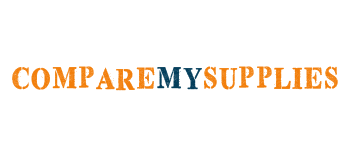
<style>
.page{position:relative;width:350px;height:150px;background:#ffffff}
.page>*{position:absolute;margin:0}
.t1{font:30px "TopSecretStamp";color:#f27f0c}
.t2{font:30px "TopSecretStamp";color:#053f5c}
</style>
<div class="page">
<p class="t1" style="left:12px;top:66px;width:326px;height:25px">COMPARE<span class="t2">MY</span>SUPPLIES</p>
</div>
